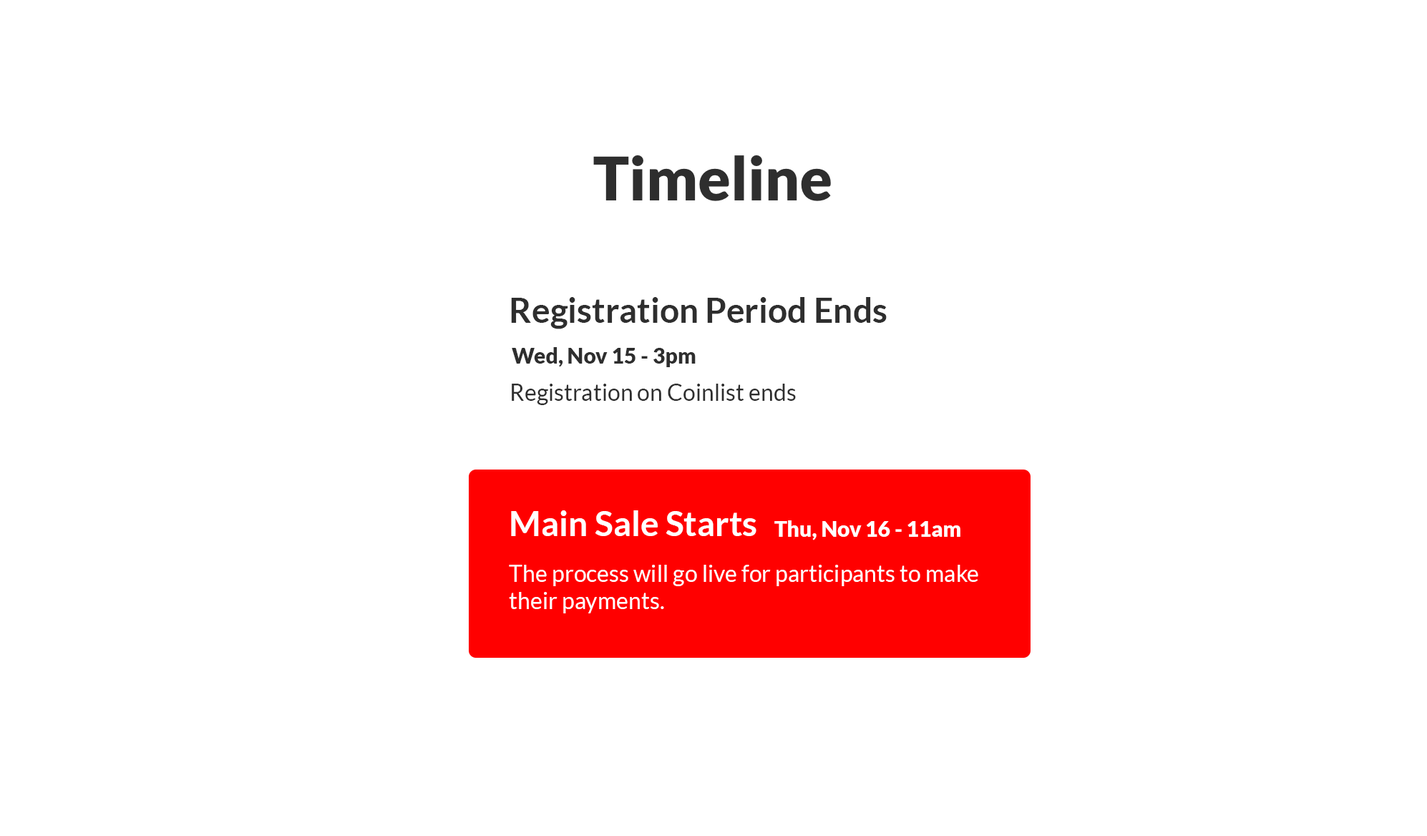
<style>
.page{position:relative;width:1427px;height:836px;background:#ffffff}
.page>*{position:absolute;margin:0}
.t1{font:34.3px "Lato-Bold";color:#2e2e2e}
.t2{font:21.5px "Lato-Black";color:#2e2e2e}
.t3{font:22.9px "Lato-Regular";color:#2e2e2e}
.t4{font:34.3px "Lato-Bold";color:#ffffff}
.t5{font:21.5px "Lato-Black";color:#ffffff}
.t6{font:22.9px "Lato-Regular";color:#ffffff}
</style>
<div class="page">
<p class="t1" style="left:511px;top:297px;width:376px;height:32px">Registration Period Ends</p>
<p class="t2" style="left:512px;top:347px;width:184px;height:20px">Wed, Nov 15 - 3pm</p>
<p class="t3" style="left:512px;top:384px;width:284px;height:21px">Registration on Coinlist ends</p>
<p class="t4" style="left:511px;top:510px;width:245px;height:26px">Main Sale Starts</p>
<p class="t5" style="left:774px;top:520px;width:186px;height:20px">Thu, Nov 16 - 11am</p>
<p class="t6" style="left:509px;top:565px;width:469px;height:48px">The process will go live for participants to make <br>their payments.</p>
</div>
